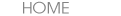
<style>
.page{position:relative;width:121px;height:16px;background:#ffffff}
.page>*{position:absolute;margin:0}
.t1{font:16px "AvantGardeITCbyBT-Book";color:#838383;scale:1.1 1}
</style>
<div class="page">
<p class="t1" style="left:23px;top:1px;width:46px;height:13px">HOME</p>
</div>
